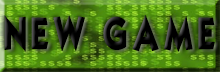
<style>
.page{position:relative;width:220px;height:72px}
.page>*{position:absolute;margin:0}
.t1{font:38.8px "KabelBook";letter-spacing:0.1em;color:#000000;text-transform:uppercase;font-weight:bold;scale:0.75 1}
</style>
<div class="page">
<p class="t1" style="left:4px;top:15px;width:211px;height:37px">NEW GAME</p>
</div>
